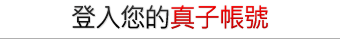
<style>
.page{position:relative;width:340px;height:40px;background:#ffffff}
.page>*{position:absolute;margin:0}
.t1{font:26px "MicrosoftJhengHeiRegular";letter-spacing:-0.05em;color:#191919}
.t2{font:26px "MicrosoftJhengHeiRegular";letter-spacing:-0.05em}
</style>
<div class="page">
<p class="t1" style="left:72px;top:5px;width:97px;height:24px">登入您的</p>
<p class="t2" style="left:171px;top:5px;width:97px;height:24px">真子帳號</p>
</div>
